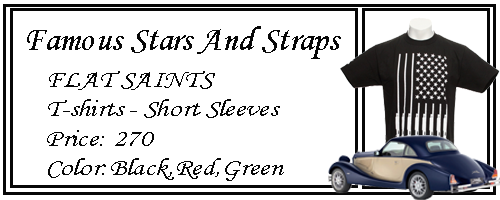
<style>
.page{position:relative;width:500px;height:200px;background:#ffffff}
.page>*{position:absolute;margin:0}
.t1{font:34.8px "MonotypeCorsiva";color:#070707}
.t2{font:24.7px "MonotypeCorsiva";color:#070707;scale:1.18 1}
</style>
<div class="page">
<p class="t1" style="left:27px;top:26px;width:314px;height:33px">Famous Stars And Straps</p>
<p class="t2" style="left:47px;top:71px;width:237px;height:110px">FLAT SAINTS<br>T-shirts - Short Sleeves<br>Price: 270<br>Color:Black,Red,Green</p>
</div>
